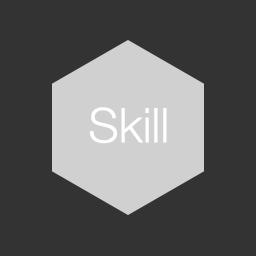
<style>
.page{position:relative;width:256px;height:256px;background:#333333}
.page>*{position:absolute;margin:0}
.t1{font:48px "HelveticaNeue-Light";color:#ffffff}
</style>
<div class="page">
<p class="t1" style="left:90px;top:107px;width:77px;height:37px">Skill</p>
</div>
